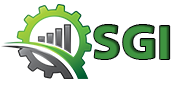
<style>
.page{position:relative;width:178px;height:85px;background:#ffffff}
.page>*{position:absolute;margin:0}
.t1{font:48px "Humanist777BT-BlackB";color:#3f9340}
</style>
<div class="page">
<p class="t1" style="left:94px;top:25px;width:76px;height:34px">SGI</p>
</div>
